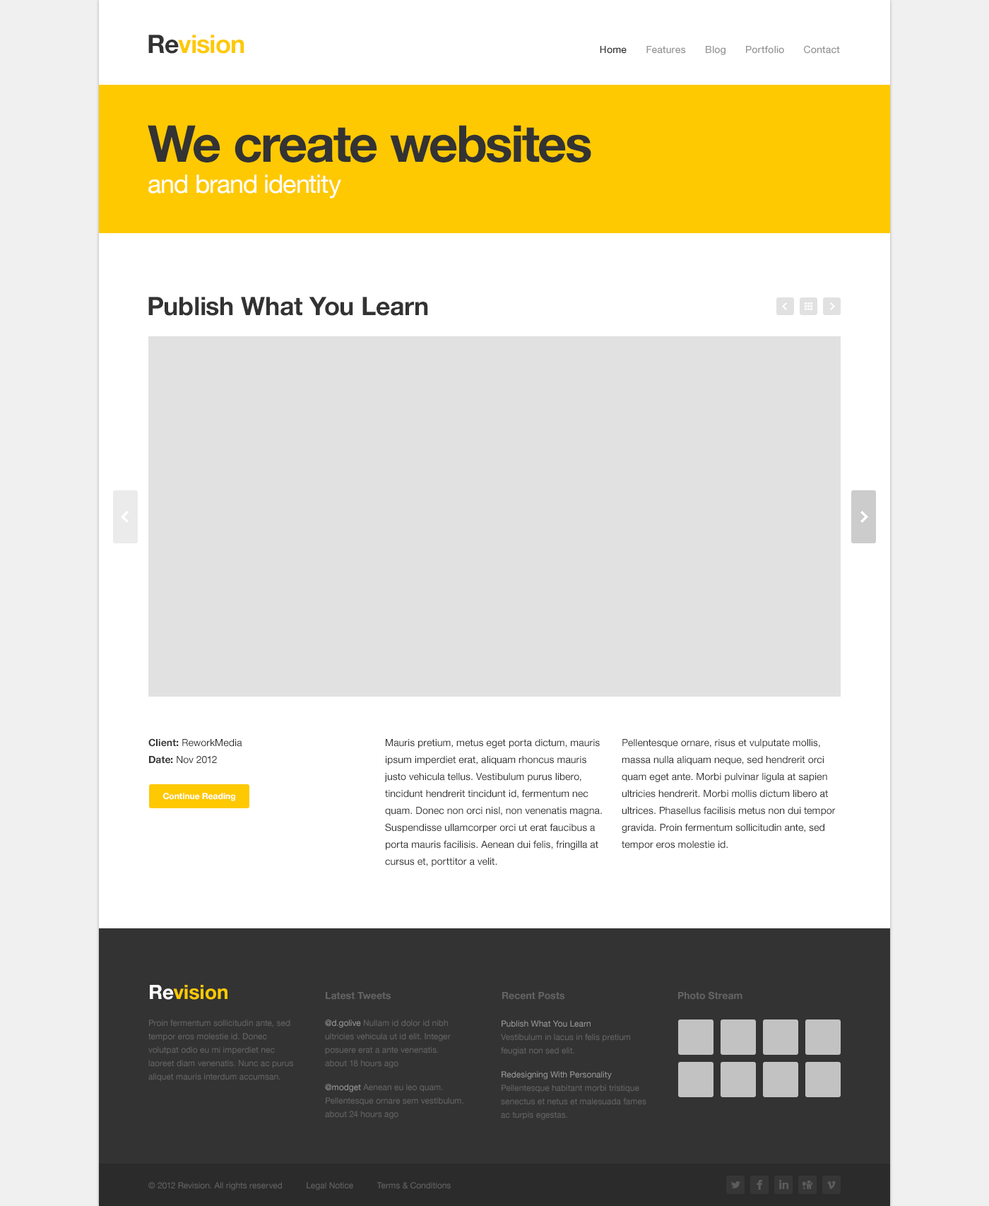
<style>
.page{position:relative;width:989px;height:1206px;background:#ffffff}
.page>*{position:absolute;margin:0}
.t1{font:25.4px "HelveticaNeue-Bold";letter-spacing:-0.025em;color:#fec901}
.t2{font:25.4px "HelveticaNeue-Bold";letter-spacing:-0.025em;color:#333333}
.t3{font:9.9px "HelveticaNeue-Medium";color:#959595}
.t4{font:9.9px "HelveticaNeue-Medium";color:#333333}
.t5{font:50.9px "HelveticaNeue-Bold";letter-spacing:-0.025em;color:#333333}
.t6{font:25.4px "HelveticaNeue";letter-spacing:-0.025em;color:#ffffff}
.t7{font:25.4px "HelveticaNeue-Bold";letter-spacing:-0.01em;color:#333333}
.t8{font:9.9px/17px "HelveticaNeue";color:#333333}
.t9{font:9.9px/17px "HelveticaNeue-Bold";color:#333333}
.t10{font:8.5px "HelveticaNeue-Bold";color:#ffffff}
.t11{font:19.8px "HelveticaNeue-Bold";color:#fec901}
.t12{font:19.8px "HelveticaNeue-Bold";color:#ffffff}
.t13{font:9.9px "HelveticaNeue-Bold";color:#636363}
.t14{font:8.5px/13.4px "HelveticaNeue";color:#636363}
.t15{font:8.5px/13.4px "HelveticaNeue";color:#959595}
.t16{font:8.5px "HelveticaNeue";color:#636363}
</style>
<div class="page">
<p class="t1" style="left:148px;top:35px;width:96px;height:19px"><span class="t2">Re</span>vision</p>
<p class="t3" style="left:600px;top:45px;width:240px;height:10px"><span class="t4">Home       </span>Features       Blog       Portfolio       Contact</p>
<p class="t5" style="left:148px;top:125px;width:443px;height:73px">We create websites<br><span class="t6">and brand identity</span></p>
<p class="t7" style="left:148px;top:297px;width:280px;height:19px">Publish What You Learn</p>
<p class="t8" style="left:148px;top:738px;width:94px;height:26px"><span class="t9">Client:</span> ReworkMedia<br><span class="t9">Date: </span>Nov 2012</p>
<p class="t8" style="left:384px;top:739px;width:218px;height:128px">Mauris pretium, metus eget porta dictum, mauris ipsum imperdiet erat, aliquam rhoncus mauris justo vehicula tellus. Vestibulum purus libero, tincidunt hendrerit tincidunt id, fermentum nec quam. Donec non orci nisl, non venenatis magna. Suspendisse ullamcorper orci ut erat faucibus a porta mauris facilisis. Aenean dui felis, fringilla at cursus et, porttitor a velit.</p>
<p class="t8" style="left:622px;top:739px;width:214px;height:111px">Pellentesque ornare, risus et vulputate mollis, massa nulla aliquam neque, sed hendrerit orci quam eget ante. Morbi pulvinar ligula at sapien ultricies hendrerit. Morbi mollis dictum libero at ultrices. Phasellus facilisis metus non dui tempor gravida. Proin fermentum sollicitudin ante, sed tempor eros molestie id.</p>
<p class="t10" style="left:163px;top:793px;width:72px;height:8px">Continue Reading</p>
<p class="t11" style="left:150px;top:985px;width:77px;height:15px"><span class="t12">Re</span>vision</p>
<p class="t13" style="left:326px;top:992px;width:65px;height:8px">Latest Tweets</p>
<p class="t13" style="left:502px;top:992px;width:62px;height:8px">Recent Posts</p>
<p class="t13" style="left:678px;top:991px;width:64px;height:9px">Photo Stream</p>
<p class="t14" style="left:148px;top:1019px;width:145px;height:62px">Proin fermentum sollicitudin ante, sed tempor eros molestie id. Donec volutpat odio eu mi imperdiet nec laoreet diam venenatis. Nunc ac purus aliquet mauris interdum accumsan.</p>
<p class="t14" style="left:325px;top:1019px;width:138px;height:100px"><span class="t15">@d.golive </span>Nullam id dolor id nibh ultricies vehicula ut id elit. Integer posuere erat a ante venenatis.<br>about 18 hours ago<br><span class="t15">@modget </span>Aenean eu leo quam. Pellentesque ornare sem vestibulum.<br>about 24 hours ago</p>
<p class="t14" style="left:501px;top:1020px;width:145px;height:100px"><span class="t15">Publish What You Learn<br></span>Vestibulum in lacus in felis pretium feugiat non sed elit.<br><span class="t15">Redesigning With Personality<br></span>Pellentesque habitant morbi tristique senectus et netus et malesuada fames ac turpis egestas.</p>
<p class="t16" style="left:148px;top:1182px;width:303px;height:8px">© 2012 Revision. All rights reserved          Legal Notice          Terms &amp; Conditions</p>
</div>
